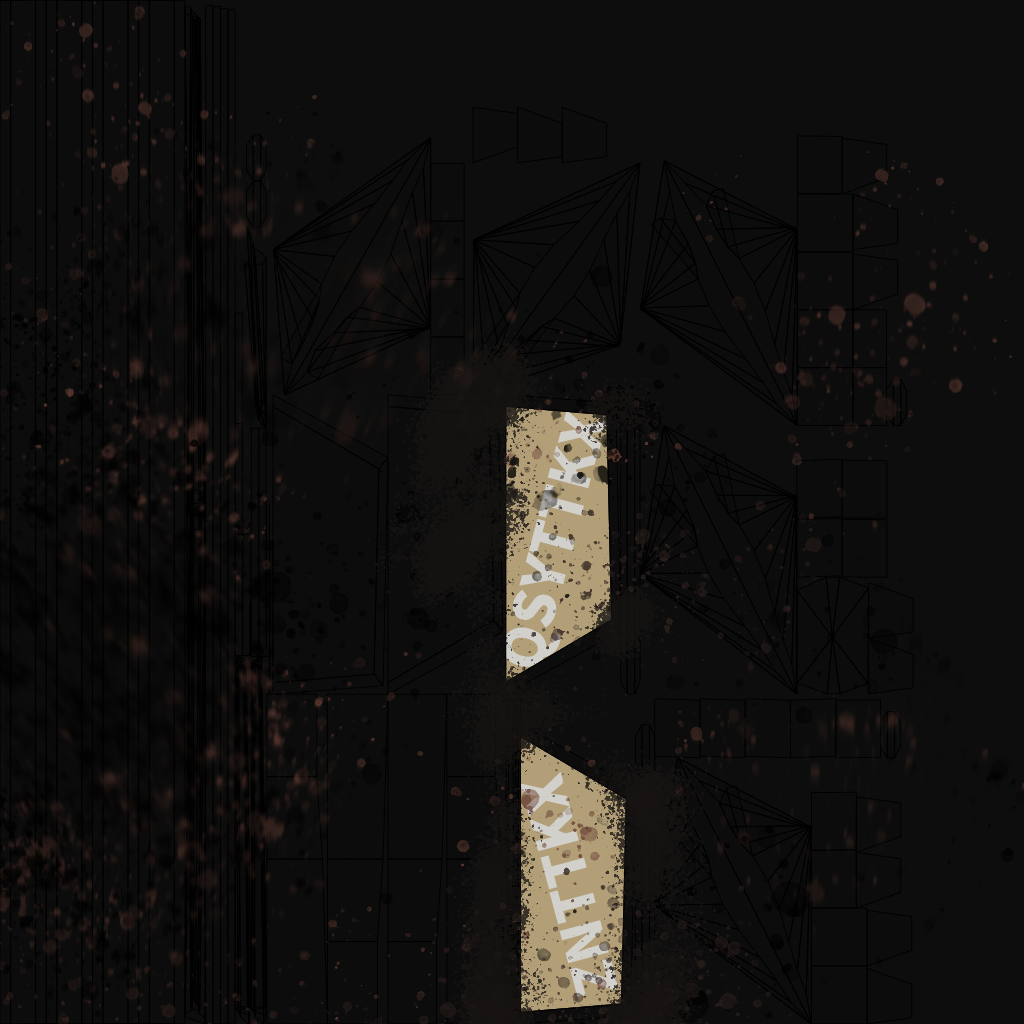
<style>
.page{position:relative;width:1024px;height:1024px;background:#0c0c0c}
.page>*{position:absolute;margin:0}
.t1{font:56.4px "SourceHanSansSC-Heavy";color:#dddbd5}
</style>
<div class="page">
<p class="t1" style="left:502px;top:409px;width:106px;height:258px;rotate:-75deg">QSYTTKX</p>
<p class="t1" style="left:520px;top:772px;width:99px;height:225px;rotate:-105deg">ZNTTKX</p>
</div>
